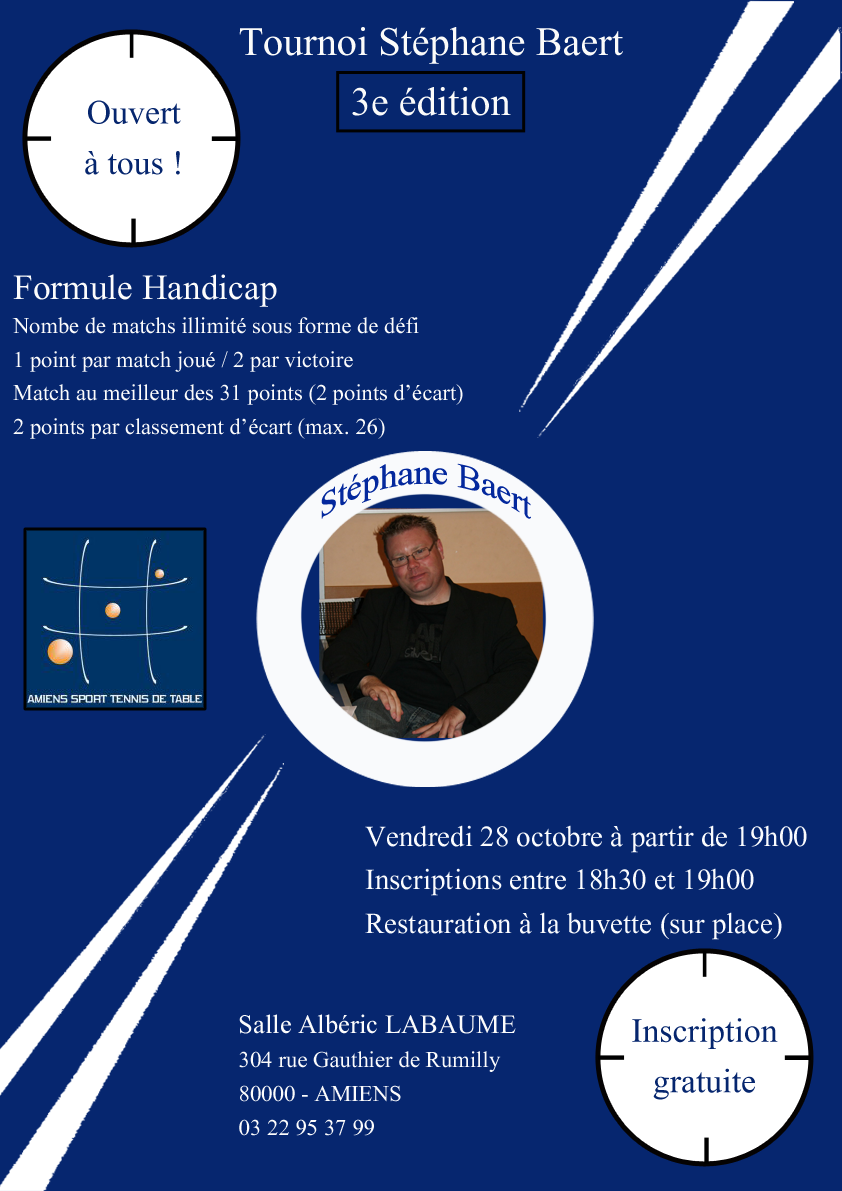
<style>
.page{position:relative;width:842px;height:1191px;background:#06266f}
.page>*{position:absolute;margin:0}
.t1{font:50px "Aparajita";color:#fbfbfa}
.t2{font:42px "Aparajita";color:#06266e}
.t3{font:28px "Aparajita";color:#fcfcfc}
.t4{font:44px "Aparajita";color:#fcfcfc}
.t5{font:42px "Aparajita";color:#04289d}
.t6{font:36px "Aparajita";color:#fbfcfe}
.t7{font:28.3px "Aparajita";color:#fcfcfc}
.t8{font:33px "Aparajita";color:#fcfcfc}
</style>
<div class="page">
<p class="t1" style="left:239px;top:27px;width:384px;height:89px;text-align:center">Tournoi Stéphane Baert<br>3e édition</p>
<p class="t2" style="left:85px;top:100px;width:96px;height:75px;text-align:center">Ouvert<br>à tous !</p>
<p class="t3" style="left:12px;top:274px;width:451px;height:165px"><span class="t4">Formule Handicap<br></span>Nombe de matchs illimité sous forme de défi<br>1 point par match joué / 2 par victoire<br>Match au meilleur des 31 points (2 points d’écart)<br>2 points par classement d’écart (max. 26)</p>
<p class="t5" style="left:321px;top:463px;width:210px;height:56px">Stéphane Baert</p>
<p class="t6" style="left:365px;top:825px;width:442px;height:115px">Vendredi 28 octobre à partir de 19h00<br>Inscriptions entre 18h30 et 19h00<br>Restauration à la buvette (sur place)</p>
<p class="t7" style="left:239px;top:1014px;width:277px;height:122px"><span class="t8">Salle Albéric LABAUME<br></span>304 rue Gauthier de Rumilly<br>80000 - AMIENS<br>03 22 95 37 99</p>
<p class="t2" style="left:632px;top:1018px;width:146px;height:82px;text-align:center">Inscription gratuite</p>
</div>
